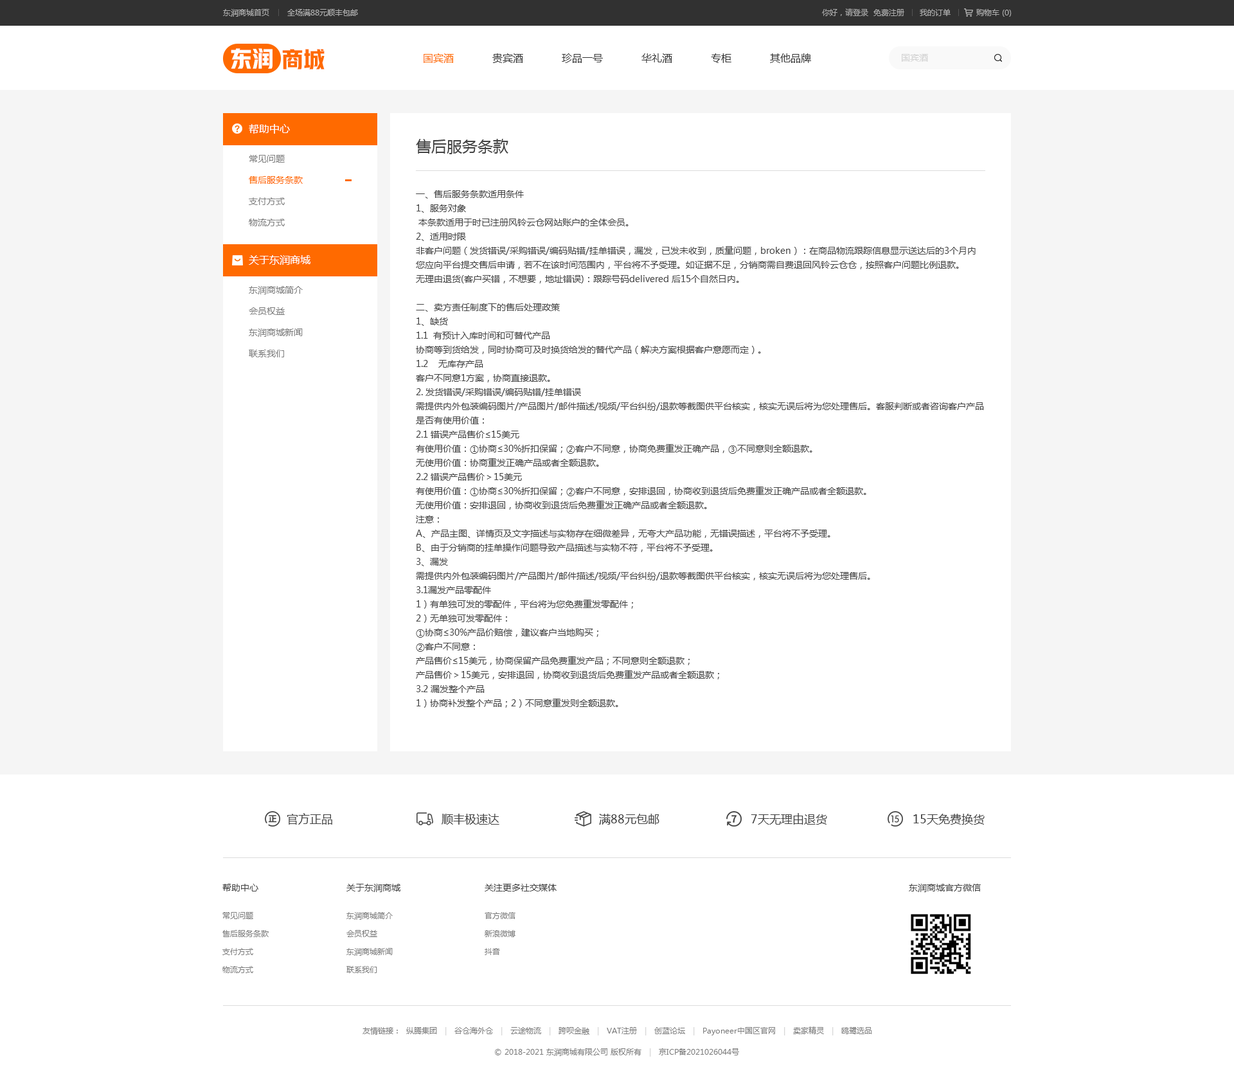
<style>
.page{position:relative;width:1234px;height:1083px;background:#ffffff}
.page>*{position:absolute;margin:0}
.t1{font:7.7px "MicrosoftYaHei";color:#b0b0b0}
.t2{font:7.7px "MicrosoftYaHei";color:#acacac}
.t3{font:21.9px "HYYakuHei-HEW";color:#ffffff}
.t4{font:21.9px "HYYakuHei-HEW";color:#ff6a00}
.t5{font:10.3px "MicrosoftYaHei";color:#333333}
.t6{font:10.3px "MicrosoftYaHei";color:#ff6a00}
.t7{font:9px "MicrosoftYaHei";color:#d2d2d2}
.t8{font:10.3px "MicrosoftYaHei";color:#ffffff}
.t9{font:15.4px "MicrosoftYaHei";color:#434343}
.t10{font:9px/21.2px "MicrosoftYaHei";color:#7d7d7d}
.t11{font:9px/21.2px "MicrosoftYaHei";color:#ff6a00}
.t12{font:9px/14.1px "MicrosoftYaHei";color:#434343}
.t13{font:11.6px "MicrosoftYaHei";color:#434343}
.t14{font:9px "MicrosoftYaHei";color:#434343}
.t15{font:7.7px/18px "MicrosoftYaHei";color:#7d7d7d}
.t16{font:7.7px "MicrosoftYaHei";color:#7d7d7d}
.t17{font:7.7px "MicrosoftYaHei";color:#d2d2d2}
</style>
<div class="page">
<p class="t1" style="left:223px;top:9px;width:135px;height:8px">东润商城首页       全场满88元顺丰包邮</p>
<p class="t2" style="left:822px;top:8px;width:190px;height:9px">你好，请登录  免费注册      我的订单          购物车 (0)</p>
<p class="t3" style="left:231px;top:48px;width:42px;height:21px">东润</p>
<p class="t4" style="left:282px;top:49px;width:43px;height:20px">商城</p>
<p class="t5" style="left:424px;top:53px;width:387px;height:10px"><span class="t6">国宾酒</span>            贵宾酒            珍品一号            华礼酒            专柜            其他品牌</p>
<p class="t7" style="left:902px;top:54px;width:26px;height:8px">国宾酒</p>
<p class="t8" style="left:249px;top:124px;width:41px;height:10px">帮助中心</p>
<p class="t9" style="left:416px;top:139px;width:93px;height:15px">售后服务条款</p>
<p class="t10" style="left:249px;top:155px;width:54px;height:71px">常见问题<br><span class="t11">售后服务条款<br></span>支付方式<br>物流方式</p>
<p class="t12" style="left:416px;top:190px;width:568px;height:518px">一、售后服务条款适用条件<br>1、服务对象<br> 本条款适用于时已注册风铃云仓网站账户的全体会员。<br>2、适用时限<br>非客户问题（发货错误/采购错误/编码贴错/挂单错误，漏发，已发未收到，质量问题，broken）：在商品物流跟踪信息显示送达后的3个月内您应向平台提交售后申请，若不在该时间范围内，平台将不予受理。如证据不足，分销商需自费退回风铃云仓仓，按照客户问题比例退款。<br>无理由退货(客户买错，不想要，地址错误)：跟踪号码delivered 后15个自然日内。<br><br>二、卖方责任制度下的售后处理政策<br>1、缺货<br>1.1  有预计入库时间和可替代产品<br>协商等到货给发，同时协商可及时换货给发的替代产品（解决方案根据客户意愿而定）。<br>1.2    无库存产品<br>客户不同意1方案，协商直接退款。<br>2. 发货错误/采购错误/编码贴错/挂单错误<br>需提供内外包装编码图片/产品图片/邮件描述/视频/平台纠纷/退款等截图供平台核实，核实无误后将为您处理售后。客服判断或者咨询客户产品是否有使用价值：<br>2.1 错误产品售价≤15美元<br>有使用价值：①协商≤30%折扣保留；②客户不同意，协商免费重发正确产品，③不同意则全额退款。<br>无使用价值：协商重发正确产品或者全额退款。<br>2.2 错误产品售价＞15美元<br>有使用价值：①协商≤30%折扣保留；②客户不同意，安排退回，协商收到退货后免费重发正确产品或者全额退款。<br>无使用价值：安排退回，协商收到退货后免费重发正确产品或者全额退款。<br>注意：<br>A、产品主图、详情页及文字描述与实物存在细微差异，无夸大产品功能，无错误描述，平台将不予受理。<br>B、由于分销商的挂单操作问题导致产品描述与实物不符，平台将不予受理。<br>3、漏发<br>需提供内外包装编码图片/产品图片/邮件描述/视频/平台纠纷/退款等截图供平台核实，核实无误后将为您处理售后。<br>3.1漏发产品零配件<br>1）有单独可发的零配件，平台将为您免费重发零配件；<br>2）无单独可发零配件：<br>①协商≤30%产品价赔偿，建议客户当地购买；<br>②客户不同意：<br>产品售价≤15美元，协商保留产品免费重发产品；不同意则全额退款；<br>产品售价＞15美元，安排退回，协商收到退货后免费重发产品或者全额退款；<br>3.2 漏发整个产品<br>1）协商补发整个产品；2）不同意重发则全额退款。<br><br>三、买方责任制度下的售后处理政策<br>1、付款问题<br>由于网站bug原因或者系统维护导致多次重复付款，平台核实后，给予退还多余款项。<br>2、地址错误<br>2.1 原件退回到仓库<br>①退款45%~55%（不同会员等级享受不同权益）订单金额（剩余的55%~45%订单金额，用于抵扣商品包装、分拣、仓储、关税、头尾程运费、海外仓退件处理费等相关费用）；<br>②需要产品，补运费给重发到正确的地址。<br>2.2 非原件退回<br>经协调找到货品，平台不承担退回运费且不支持运费到付，客户自行退货：<br>1）   产品售价≤15美元,(不建议退货)<br>①收到退货，退款45%~55%（不同会员等级享受不同权益）订单金额（剩余的55%~45%订单金额，用于抵扣商品包装、分拣、仓储、关税、头尾程运费、海外仓退件处理费等相关费用；不足3美元的订单，直接收取3美元的仓库管理费），<br>②需要产品，补运费给重发到正确的地址。<br>2）产品售价＞15美元,<br>①收到退货，退款45%~55%（不同会员等级享受不同权益）订单金额（剩余的55%~45%订单金额，用于抵扣商品包装、分拣、仓储、关税、头尾程运费、海外仓退件处理费等相关费用）；<br>②需要产品，收到退货补运费重发到正确的地址。<br>2.3   若无法找到货物，平台不予退款。<br>3、客户问题<br>客户个人原因不想要/买错此产品，对收到的产品不满意（产品与挂单描述吻合的前提下，客户对收到产品的尺寸大小、材质等不满意），客户买错或分销商操作失误导致下单错误（非产品原因）<br>平台不承担退回运费且不支持运费到付，客户自行退货：<br>3.1产品售价≤15美元,（不建议退货）<br>①收到退货，退款45%~55%（不同会员等级享受不同权益）订单金额（剩余的55%~45% 订单金额，用于抵扣商品包装、分拣、仓储、关税、头尾程运费、海外仓退件处理费等相关费用）；<br>②有客户需要的产品，补运费重发正确的产品。<br>3.2 产品售价＞15美元<br>①收到退货，退款45%~55%（不同会员等级享受不同权益）订单金额（剩余的55%~45%订单金额，用于抵扣商品包装、分拣、仓储、关税、头尾程运费、海外仓退件处理费等相关费用）；<br>②有客户需要的产品，收到退货补运费重发正确的产品。<br>若终端买家通过跨境平台自动退货：                  <br>1.所有的客户问题终端客户联系分销商，分销商都需要第一时间和冠客服沟通，风铃云仓客服提供RMA ，终端买家将RMA填写在包裹上退回 ，退货后提供跟踪号码给风铃云仓客服                         <br>2.终端买家未联系分销商自行安排退回，分销商需在5个自然日内确认并给风铃云仓平台提供跟踪号码，以便风铃云仓做好仓库退货登记，                          <br>3.若客户自行退回没有提供跟踪号，或者跟踪号delivered后 2个自然日内还未告知，风铃云仓平台不予退款处理。<br><br>四、第三方责任制下的售后处理政策<br>已发未收到<br>跟踪号没有delivered，协商重发或者全额退款处理。<br>1）运输途中丢失：订单已发出但客户未收到，且物流不更新（订单物流轨迹超过7天不更新），可以根据终端买家要求可以申请全额退款或者重发<br>2）未成功发送：跟踪号码只是创建了货运lable.未在7天内成功激活（订单物流轨迹超过7天不更新），根据终端买家要求可以申请全额退款或者重发<br><br>五、产品问题售后处理政策<br>1、产品质量问题/成色问题/产品不适用<br>需提供问题产品照片或者视频（需持续动态显示问题产品的视频）/邮件描述/平台纠纷/退款等截图供平台核实，核实无误后将为您处理售后，若无法提供相应的证据证明产品具体问题，则按照客户问题处理，需分销商自付运费退回产品。<br>1.1   产品售价≤15美元<br>产品可以使用：协商≤30%退款保留，若不保留，协商免费重发或者全额退款；<br>产品不能使用：协商免费重发或者全额退款。<br>1.2   产品售价＞15美元<br>产品可以使用：协商≤30%退款保留，若不保留，安排发RL退货，您应将RL及时发送给您的客户，到货给重发或者全额退款；<br>产品不能使用：安排发RL退货，您应将RL及时发送给您的客户，到货给重发或者全额退款。<br>2、Broken<br>您应在订单物流跟踪信息显示产品送达后的5个工作日内（如遇周末或节假日则顺延）向平台提出售后申请，并提供相应证据（产品照片或者视频（需持续动态显示问题产品的视频）/邮件描述/平台纠纷/退款等截图）。<br>2.1 轻微broken，不影响正常使用<br>1）协商≤30%部分退款，保留产品；<br>2）协商无效，则按以下方式处理<br>①产品售价≤15美元,协商直接重发或者全额退款；<br>②产品售价＞15美元,发RL退回到货，协商重发或者全额退款。<br>2.2 严重broken，产品无法正常使用<br>1）需要重发，安排免费重发；<br>2）需要退款，直接全额退款。</p>
<p class="t8" style="left:249px;top:255px;width:61px;height:10px">关于东润商城</p>
<p class="t10" style="left:249px;top:286px;width:54px;height:71px">东润商城简介<br>会员权益<br>东润商城新闻<br>联系我们</p>
<p class="t13" style="left:287px;top:813px;width:45px;height:12px">官方正品</p>
<p class="t13" style="left:442px;top:814px;width:58px;height:11px">顺丰极速达</p>
<p class="t13" style="left:599px;top:814px;width:61px;height:11px">满88元包邮</p>
<p class="t13" style="left:751px;top:813px;width:76px;height:12px">7天无理由退货</p>
<p class="t13" style="left:914px;top:814px;width:71px;height:11px">15天免费换货</p>
<p class="t14" style="left:222px;top:884px;width:36px;height:8px">帮助中心</p>
<p class="t14" style="left:346px;top:884px;width:55px;height:8px">关于东润商城</p>
<p class="t14" style="left:485px;top:884px;width:72px;height:8px">关注更多社交媒体</p>
<p class="t14" style="left:909px;top:884px;width:72px;height:8px">东润商城官方微信</p>
<p class="t15" style="left:222px;top:912px;width:47px;height:61px">常见问题<br>售后服务条款<br>支付方式<br>物流方式</p>
<p class="t15" style="left:346px;top:912px;width:47px;height:61px">东润商城简介<br>会员权益<br>东润商城新闻<br>联系我们</p>
<p class="t15" style="left:485px;top:912px;width:31px;height:43px">官方微信<br>新浪微博<br>抖音</p>
<p class="t16" style="left:363px;top:1027px;width:509px;height:9px">友情链接：  纵腾集团   <span class="t17">|   </span>谷仓海外仓   <span class="t17">|   </span>云途物流   <span class="t17">|   </span>跨呗金融   <span class="t17">|   </span>VAT注册   <span class="t17">|   </span>创蓝论坛   <span class="t17">|   </span>Payoneer中国区官网   <span class="t17">|   </span>卖家精灵   <span class="t17">|   </span>鸥鹭选品</p>
<p class="t16" style="left:495px;top:1048px;width:244px;height:9px">© 2018-2021 东润商城有限公司 版权所有   <span class="t17">|   </span>京ICP备2021026044号</p>
</div>
